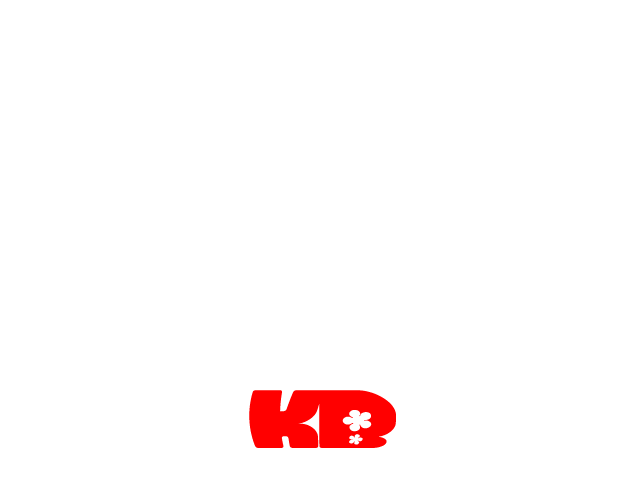
<style>
.page{position:relative;width:640px;height:480px;background:#ffffff}
.page>*{position:absolute;margin:0}
.t1{font:105px "Chick";color:#ff0000}
</style>
<div class="page">
<p class="t1" style="left:249px;top:390px;width:147px;height:58px">KB</p>
</div>
